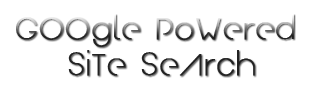
<style>
.page{position:relative;width:310px;height:90px;background:#ffffff}
.page>*{position:absolute;margin:0}
.t1{font:30px "Arual";letter-spacing:0.025em;font-weight:bold}
</style>
<div class="page">
<p class="t1" style="left:16px;top:14px;width:278px;height:62px;text-align:center">GOOgle PoWered <br>SiTe SeArch</p>
</div>
